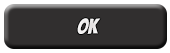
<style>
.page{position:relative;width:170px;height:53px;background:#312f2f}
.page>*{position:absolute;margin:0}
.t1{font:21px "Bangers-Regular";color:#f1efef}
</style>
<div class="page">
<p class="t1" style="left:77px;top:18px;width:24px;height:16px">OK</p>
</div>
